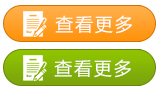
<style>
.page{position:relative;width:161px;height:90px;background:#ffffff}
.page>*{position:absolute;margin:0}
.t1{font:18px "MicrosoftYaHei";letter-spacing:0.1em;color:#ffffff}
</style>
<div class="page">
<p class="t1" style="left:55px;top:15px;width:77px;height:19px">查看更多</p>
<p class="t1" style="left:54px;top:59px;width:77px;height:19px">查看更多</p>
</div>
